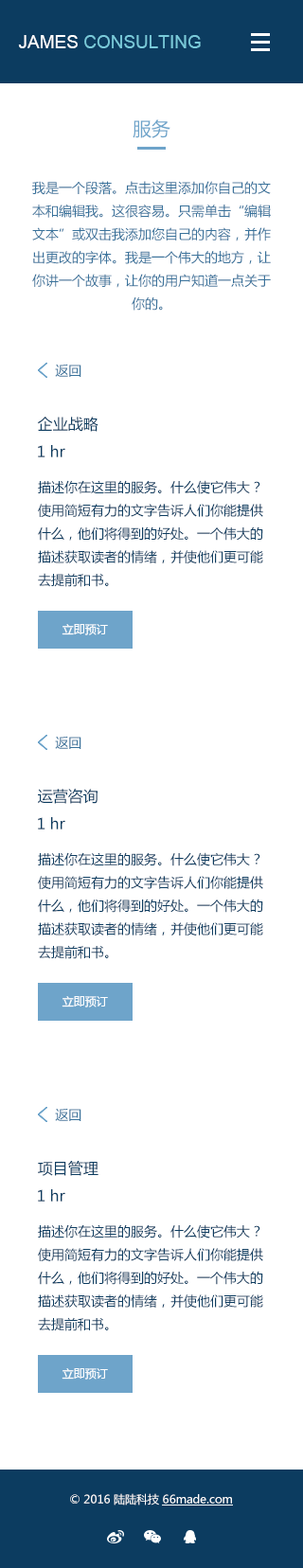
<style>
.page{position:relative;width:303px;height:1568px;background:#ffffff}
.page>*{position:absolute;margin:0}
.t1{font:18px "ArialMT";color:#79cada}
.t2{font:18px "ArialMT";color:#ffffff}
.t3{font:18.9px "MicrosoftYaHei";color:#6ea4ca}
.t4{font:13.3px "MicrosoftYaHei";color:#39729b}
.t5{font:15.1px "MicrosoftYaHei";color:#0c3c60}
.t6{font:13.3px "MicrosoftYaHei";color:#0c3c60}
.t7{font:11.4px "MicrosoftYaHei";color:#ffffff}
</style>
<div class="page">
<p class="t1" style="left:18px;top:35px;width:183px;height:13px"><span class="t2">JAMES </span>CONSULTING</p>
<p class="t3" style="left:133px;top:119px;width:37px;height:19px">服务</p>
<p class="t4" style="left:32px;top:181px;width:239px;height:130px;text-align:center">我是一个段落。点击这里添加你自己的文本和编辑我。这很容易。只需单击“编辑文本”或双击我添加您自己的内容，并作出更改的字体。我是一个伟大的地方，让你讲一个故事，让你的用户知道一点关于你的。</p>
<p class="t4" style="left:55px;top:364px;width:26px;height:13px">返回</p>
<p class="t5" style="left:37px;top:417px;width:61px;height:15px">企业战略</p>
<p class="t5" style="left:38px;top:445px;width:27px;height:12px">1 hr</p>
<p class="t6" style="left:38px;top:480px;width:225px;height:107px">描述你在这里的服务。什么使它伟大？使用简短有力的文字告诉人们你能提供什么，他们将得到的好处。一个伟大的描述获取读者的情绪，并使他们更可能去提前和书。</p>
<p class="t7" style="left:62px;top:624px;width:46px;height:11px">立即预订</p>
<p class="t4" style="left:55px;top:736px;width:26px;height:13px">返回</p>
<p class="t5" style="left:38px;top:789px;width:60px;height:15px">运营咨询</p>
<p class="t5" style="left:38px;top:817px;width:27px;height:12px">1 hr</p>
<p class="t6" style="left:38px;top:852px;width:225px;height:107px">描述你在这里的服务。什么使它伟大？使用简短有力的文字告诉人们你能提供什么，他们将得到的好处。一个伟大的描述获取读者的情绪，并使他们更可能去提前和书。</p>
<p class="t7" style="left:62px;top:996px;width:46px;height:11px">立即预订</p>
<p class="t4" style="left:55px;top:1108px;width:26px;height:13px">返回</p>
<p class="t5" style="left:38px;top:1161px;width:60px;height:15px">项目管理</p>
<p class="t5" style="left:38px;top:1189px;width:27px;height:13px">1 hr</p>
<p class="t6" style="left:38px;top:1224px;width:225px;height:107px">描述你在这里的服务。什么使它伟大？使用简短有力的文字告诉人们你能提供什么，他们将得到的好处。一个伟大的描述获取读者的情绪，并使他们更可能去提前和书。</p>
<p class="t7" style="left:62px;top:1368px;width:46px;height:12px">立即预订</p>
<p class="t7" style="left:70px;top:1493px;width:162px;height:13px">© 2016 陆陆科技 66made.com</p>
</div>
